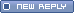
<style>
.page{position:relative;width:74px;height:13px;background:#7e95bd}
.page>*{position:absolute;margin:0}
.t1{font:8px "BitDustTwo";color:#ffffff}
</style>
<div class="page">
<p class="t1" style="left:17px;top:4px;width:49px;height:5px">NEW REPLY</p>
</div>
